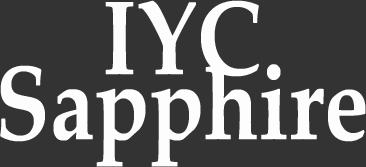
<style>
.page{position:relative;width:366px;height:167px;background:#333333}
.page>*{position:absolute;margin:0}
.t1{font:104.5px/64.7px "PalatinoLinotype-Bold";color:#fdfdfd;scale:0.86 1}
</style>
<div class="page">
<p class="t1" style="left:0px;top:0px;width:366px;height:167px;text-align:center">IYC<br>Sapphire</p>
</div>
